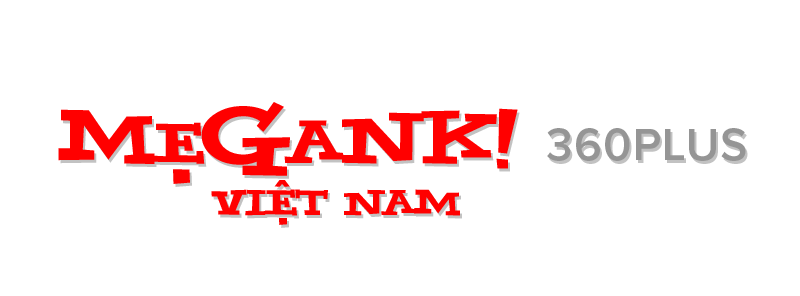
<style>
.page{position:relative;width:800px;height:296px;background:#ffffff}
.page>*{position:absolute;margin:0}
.t1{font:65px "Yahoo";color:#ff0000}
.t2{font:49px "Yahoo";color:#ff0000}
.t3{font:73px "Yahoo";color:#ff0000}
.t4{font:53px "Yahoo";color:#ff0000}
.t5{font:62px "Yahoo";color:#ff0000}
.t6{font:46px "ProximaNova-Semibold";letter-spacing:0.04em;color:#959595}
.t7{font:31px "Yahoo";color:#ff0000}
</style>
<div class="page">
<p class="t1" style="left:58px;top:102px;width:460px;height:74px">m<span class="t2">e</span><span class="t3">g</span><span class="t4">a</span><span class="t5">n</span>k!</p>
<p class="t6" style="left:547px;top:128px;width:199px;height:33px">360PLUS</p>
<p class="t1" style="left:173px;top:169px;width:17px;height:15px">.</p>
<p class="t7" style="left:274px;top:180px;width:16px;height:7px">^</p>
<p class="t7" style="left:211px;top:189px;width:249px;height:27px">Viet nam</p>
<p class="t7" style="left:279px;top:217px;width:8px;height:8px">.</p>
</div>
